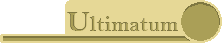
<style>
.page{position:relative;width:222px;height:43px;background:#e6d896}
.page>*{position:absolute;margin:0}
.t1{font:22px "BellMTBold"}
.t2{font:30px "BellMTBold"}
</style>
<div class="page">
<p class="t1" style="left:67px;top:12px;width:111px;height:19px"><span class="t2">U</span>ltimatum</p>
</div>
